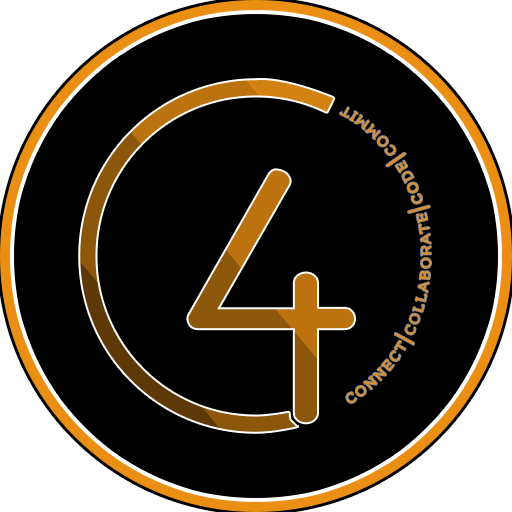
<style>
.page{position:relative;width:512px;height:512px;background:#000000}
.page>*{position:absolute;margin:0}
.t1{font:22px/43px "Flamenco-Regular";letter-spacing:0.13em;color:#ea8f13;font-variant:small-caps;font-weight:bold}
</style>
<div class="page">
<p class="t1" style="left:340px;top:107px;width:91px;height:296px">connect|collaborate|code|commit</p>
</div>
